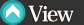
<style>
.page{position:relative;width:84px;height:25px;background:#333333}
.page>*{position:absolute;margin:0}
.t1{font:22px "HeiseiMinStd-W7";letter-spacing:-0.04em;color:#ffffff}
</style>
<div class="page">
<p class="t1" style="left:28px;top:5px;width:46px;height:17px">View</p>
</div>
